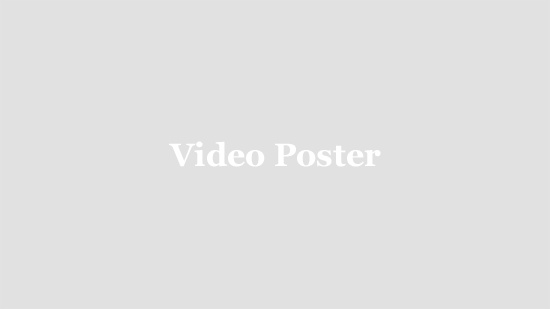
<style>
.page{position:relative;width:550px;height:309px;background:#e1e1e1}
.page>*{position:absolute;margin:0}
.t1{font:32px "Georgia-Bold";color:#ffffff}
</style>
<div class="page">
<p class="t1" style="left:169px;top:141px;width:212px;height:26px">Video Poster</p>
</div>
